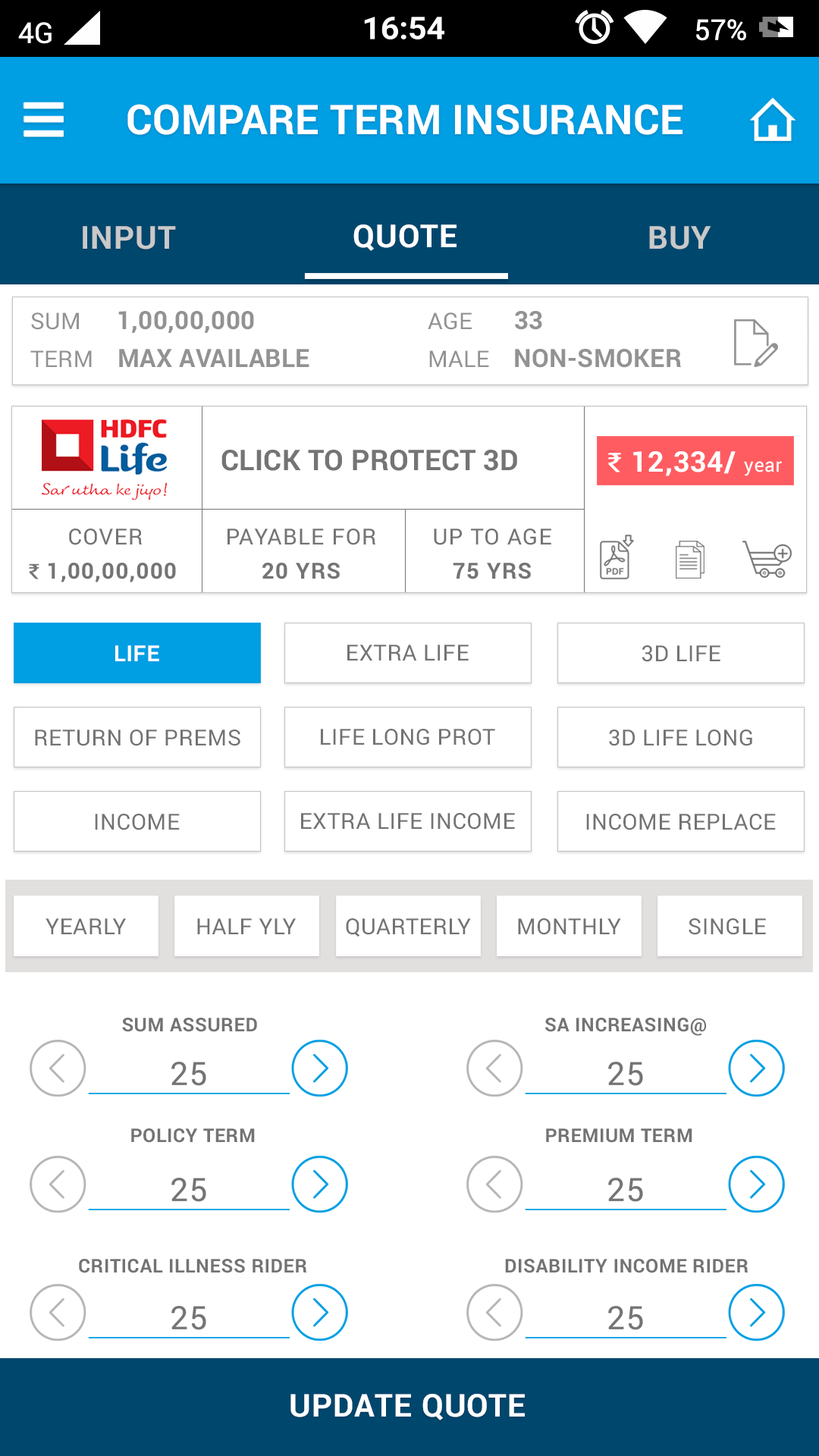
<style>
.page{position:relative;width:819px;height:1456px;background:#ffffff}
.page>*{position:absolute;margin:0}
.t1{font:41.1px "Roboto-Bold";letter-spacing:0.01em;color:#ffffff}
.t2{font:31.6px "Roboto-Bold";letter-spacing:0.025em;color:#c9c9c9}
.t3{font:31.6px "Roboto-Bold";letter-spacing:0.025em;color:#ffffff}
.t4{font:25.3px/37.9px "Roboto-Bold";letter-spacing:0.01em;color:#939292}
.t5{font:23px/37.9px "Roboto-Regular";letter-spacing:0.01em;color:#939292}
.t6{font:22.1px "Roboto-Bold";letter-spacing:0.025em;color:#ffffff}
.t7{font:22.1px "Roboto-Regular";letter-spacing:0.025em;color:#737373}
.t8{font:19px "Roboto-Bold";letter-spacing:0.025em;color:#737373}
.t9{font:31.5px "Roboto-Bold";letter-spacing:0.025em;color:#ffffff;text-transform:uppercase}
</style>
<div class="page">
<p class="t1" style="left:127px;top:104px;width:555px;height:31px">COMPARE TERM INSURANCE</p>
<p class="t2" style="left:83px;top:226px;width:93px;height:23px">INPUT</p>
<p class="t3" style="left:353px;top:224px;width:104px;height:27px">QUOTE</p>
<p class="t2" style="left:649px;top:226px;width:62px;height:23px">BUY</p>
<p class="t4" style="left:30px;top:311px;width:651px;height:57px"><span class="t5">SUM      </span>1,00,00,000                      <span class="t5">AGE       </span>33  <br><span class="t5">TERM    </span>MAX AVAILABLE            <span class="t5">MALE    </span>NON-SMOKER</p>
<p class="t6" style="left:115px;top:645px;width:44px;height:16px">LIFE</p>
<p class="t7" style="left:347px;top:645px;width:122px;height:15px">EXTRA LIFE</p>
<p class="t7" style="left:642px;top:645px;width:78px;height:17px">3D LIFE</p>
<p class="t7" style="left:35px;top:730px;width:205px;height:16px">RETURN OF PREMS</p>
<p class="t7" style="left:321px;top:729px;width:174px;height:16px">LIFE LONG PROT</p>
<p class="t7" style="left:609px;top:730px;width:143px;height:16px">3D LIFE LONG</p>
<p class="t7" style="left:95px;top:814px;width:85px;height:16px">INCOME</p>
<p class="t7" style="left:301px;top:813px;width:214px;height:17px">EXTRA LIFE INCOME</p>
<p class="t7" style="left:586px;top:814px;width:190px;height:16px">INCOME REPLACE</p>
<p class="t7" style="left:45px;top:918px;width:81px;height:16px">YEARLY</p>
<p class="t7" style="left:197px;top:918px;width:99px;height:16px">HALF YLY</p>
<p class="t7" style="left:346px;top:918px;width:125px;height:19px">QUARTERLY</p>
<p class="t7" style="left:518px;top:918px;width:103px;height:17px">MONTHLY</p>
<p class="t7" style="left:689px;top:918px;width:77px;height:17px">SINGLE</p>
<p class="t8" style="left:122px;top:1018px;width:135px;height:14px">SUM ASSURED</p>
<p class="t8" style="left:545px;top:1018px;width:162px;height:18px">SA INCREASING@</p>
<p class="t8" style="left:131px;top:1128px;width:124px;height:15px">POLICY TERM</p>
<p class="t8" style="left:546px;top:1128px;width:146px;height:15px">PREMIUM TERM</p>
<p class="t8" style="left:79px;top:1259px;width:228px;height:14px">CRITICAL ILLNESS RIDER</p>
<p class="t8" style="left:505px;top:1259px;width:243px;height:14px">DISABILITY INCOME RIDER</p>
<p class="t9" style="left:290px;top:1394px;width:235px;height:26px">UPDATE QUOTE</p>
</div>
